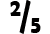
<style>
.page{position:relative;width:50px;height:34px;background:#ffffff}
.page>*{position:absolute;margin:0}
.t1{font:26.3px "BerlinSansFBDemi-Bold";color:#010000;scale:0.77 1}
.t2{font:44.6px "BerlinSansFBDemi-Bold";color:#010000;scale:0.82 1}
</style>
<div class="page">
<p class="t1" style="left:10px;top:1px;width:11px;height:15px">2</p>
<p class="t2" style="left:19px;top:0px;width:12px;height:34px">/</p>
<p class="t1" style="left:31px;top:18px;width:10px;height:15px">5</p>
</div>
